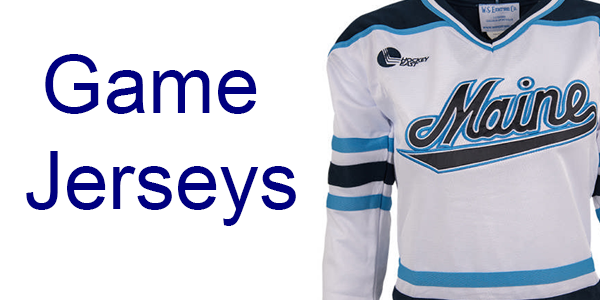
<style>
.page{position:relative;width:600px;height:300px;background:#ffffff}
.page>*{position:absolute;margin:0}
.t1{font:80px "ArialMT";color:#000080}
</style>
<div class="page">
<p class="t1" style="left:26px;top:54px;width:270px;height:172px;text-align:center">Game <br>Jerseys</p>
</div>
